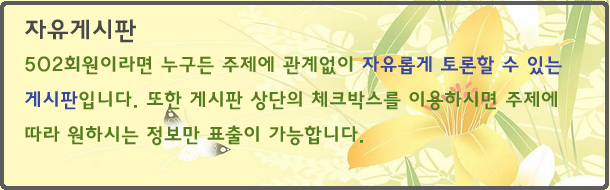
<style>
.page{position:relative;width:610px;height:190px;background:#fffac2}
.page>*{position:absolute;margin:0}
.t1{font:25px "HaanYGodic24";color:#494949}
.t2{font:20px "HaanYGodic24";color:#547d20}
.t3{font:20px "HaanYGodic24";color:#38479f}
</style>
<div class="page">
<p class="t1" style="left:25px;top:19px;width:111px;height:24px">자유게시판</p>
<p class="t2" style="left:25px;top:55px;width:537px;height:91px">502회원이라면 누구든 주제에 관계없이 <span class="t3">자유롭게 토론할 수 있는 게시판</span>입니다. 또한 게시판 상단의 체크박스를 이용하시면 주제에 따라 원하시는 정보만 표출이 가능합니다.</p>
</div>
